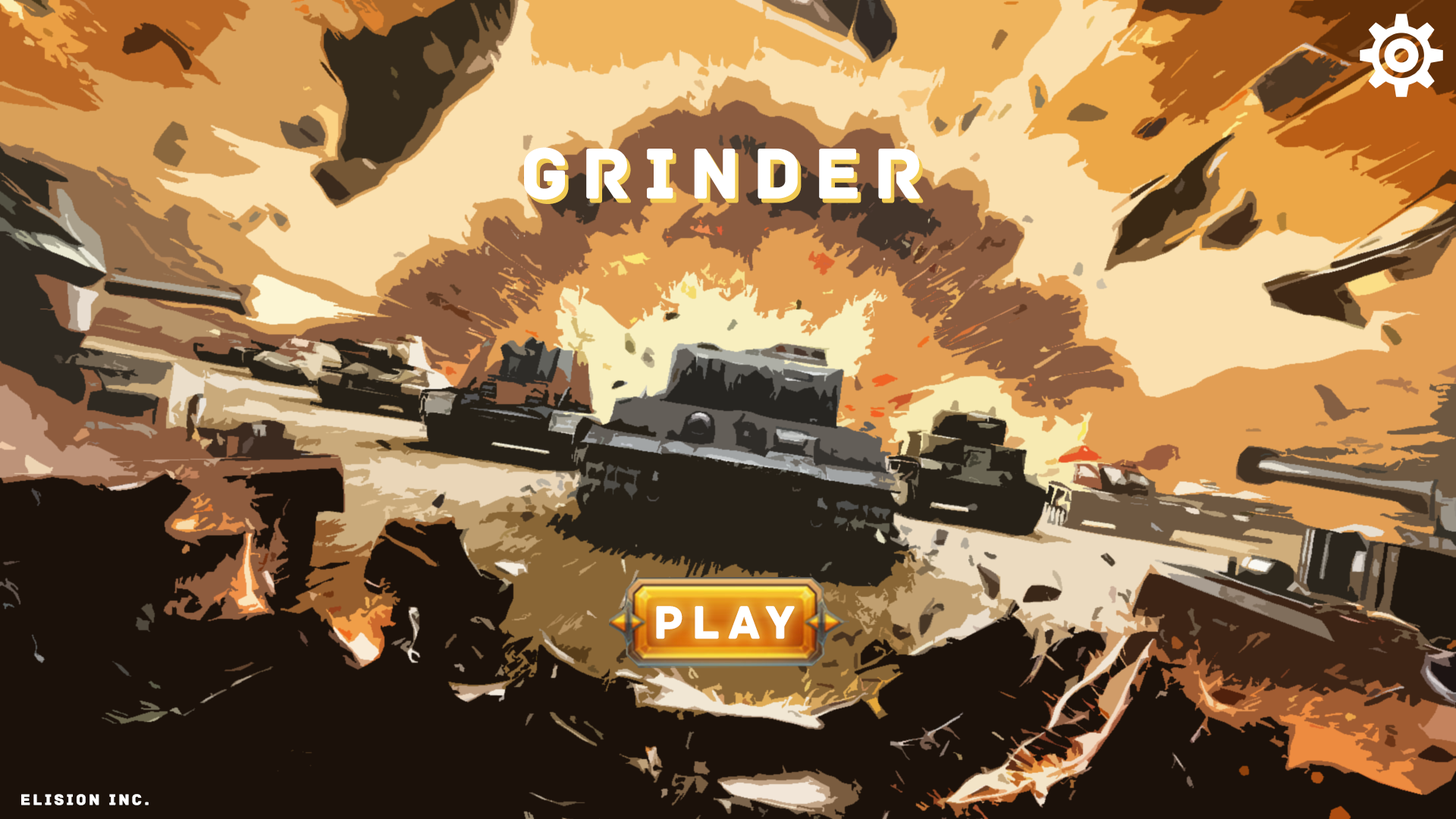
<style>
.page{position:relative;width:1456px;height:819px}
.page>*{position:absolute;margin:0}
.t1{font:74.8px "Archive";letter-spacing:0.14em;color:#ffffff;font-weight:bold}
.t2{font:74.8px "Archive";letter-spacing:0.14em;font-weight:bold}
.t3{font:48.6px "Archive";letter-spacing:0.14em;color:#ffffff;font-weight:bold}
.t4{font:15.7px "Archive";letter-spacing:0.14em;color:#ffffff;font-weight:bold}
</style>
<div class="page">
<p class="t1" style="left:524px;top:147px;width:396px;height:53px">GRINDER</p>
<p class="t2" style="left:527px;top:152px;width:397px;height:52px">GRINDER</p>
<p class="t3" style="left:656px;top:606px;width:139px;height:33px">PLAY</p>
<p class="t4" style="left:21px;top:794px;width:128px;height:11px">Elision inc.</p>
</div>
